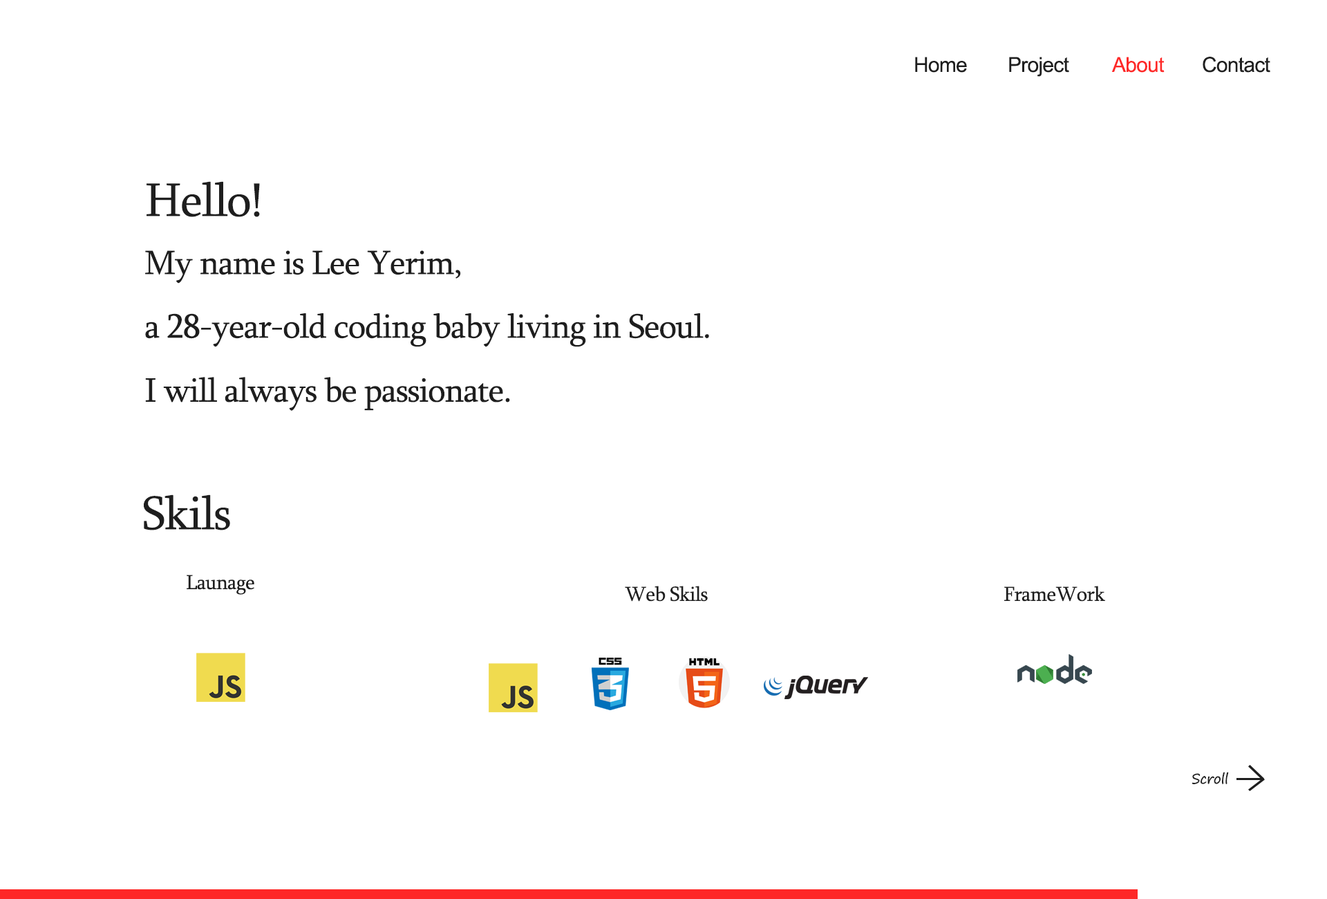
<style>
.page{position:relative;width:1327px;height:899px;background:#ffffff}
.page>*{position:absolute;margin:0}
.t1{font:20.7px "ArialMT";letter-spacing:-0.025em;color:#1f1f1f}
.t2{font:20.7px "ArialMT";letter-spacing:-0.025em;color:#fe2827}
.t3{font:48.4px "Sylfaen";letter-spacing:-0.025em;color:#1e1e1e}
.t4{font:34.6px "Sylfaen";letter-spacing:-0.025em;color:#1e1e1e}
.t5{font:20.7px "Sylfaen";letter-spacing:-0.025em;color:#1e1e1e}
.t6{font:13.8px "SegoePrint";letter-spacing:-0.025em;color:#1f1f1f}
</style>
<div class="page">
<p class="t1" style="left:915px;top:57px;width:52px;height:16px">Home</p>
<p class="t1" style="left:1009px;top:57px;width:60px;height:20px">Project</p>
<p class="t2" style="left:1111px;top:57px;width:54px;height:16px">About</p>
<p class="t1" style="left:1203px;top:57px;width:67px;height:16px">Contact</p>
<p class="t3" style="left:147px;top:181px;width:113px;height:36px">Hello!</p>
<p class="t4" style="left:145px;top:250px;width:316px;height:33px">My name is Lee Yerim,</p>
<p class="t4" style="left:145px;top:313px;width:564px;height:34px">a 28-year-old coding baby living in Seoul.</p>
<p class="t4" style="left:145px;top:377px;width:365px;height:34px">I will always be passionate.</p>
<p class="t3" style="left:144px;top:494px;width:86px;height:36px">Skils</p>
<p class="t5" style="left:187px;top:574px;width:67px;height:20px">Launage</p>
<p class="t5" style="left:625px;top:585px;width:83px;height:16px">Web Skils</p>
<p class="t5" style="left:1004px;top:585px;width:101px;height:16px">FrameWork</p>
<p class="t6" style="left:1192px;top:771px;width:37px;height:13px">Scroll</p>
</div>
